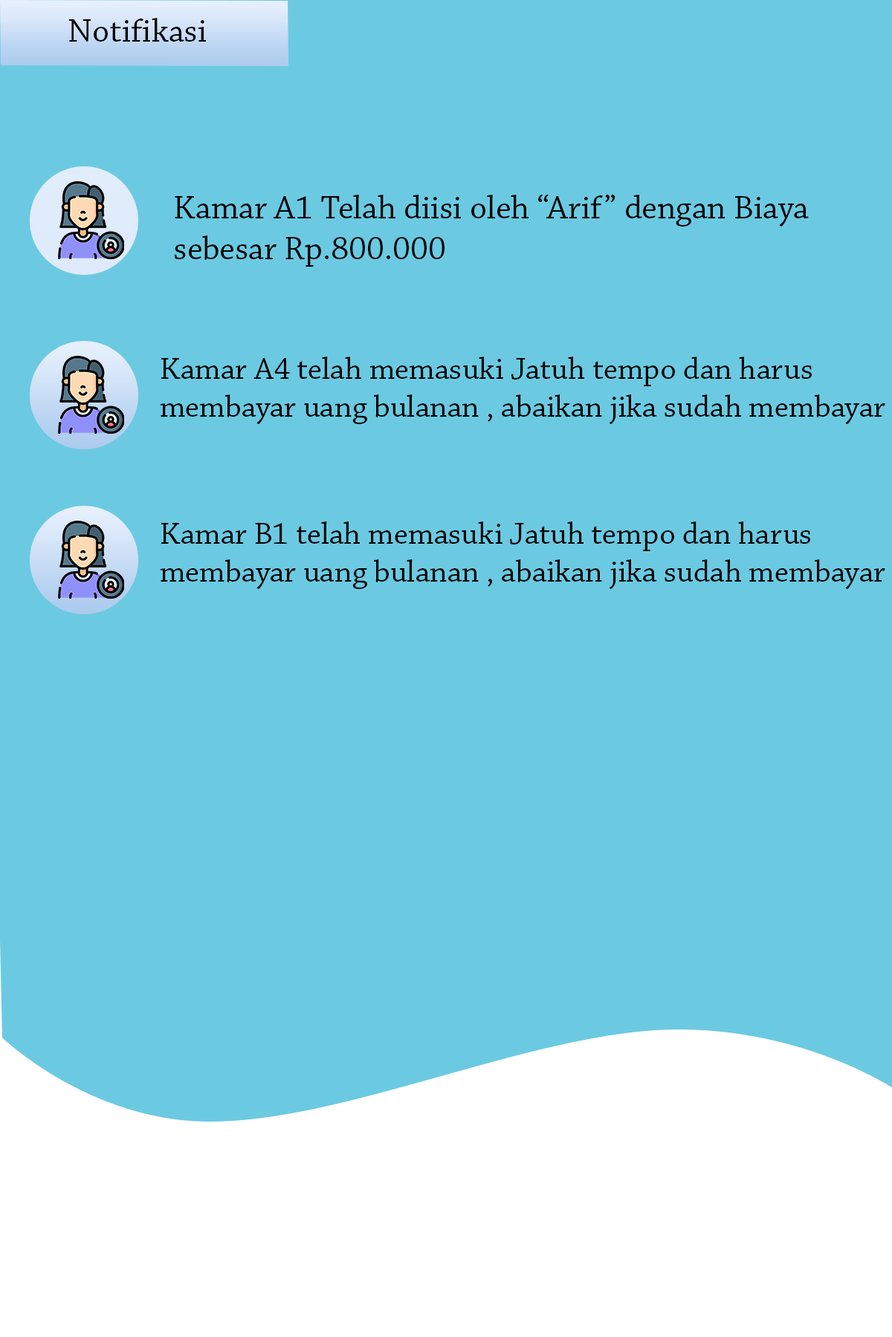
<style>
.page{position:relative;width:892px;height:1337px;background:#6bcae2}
.page>*{position:absolute;margin:0}
.t1{font:34.1px "ChaparralPro-Regular";color:#000101}
.t2{font:31.8px "ChaparralPro-Regular";color:#000101}
</style>
<div class="page">
<p class="t1" style="left:69px;top:18px;width:137px;height:24px">Notifikasi</p>
<p class="t1" style="left:174px;top:194px;width:634px;height:73px">Kamar A1 Telah diisi oleh “Arif” dengan Biaya sebesar Rp.800.000</p>
<p class="t2" style="left:160px;top:357px;width:725px;height:67px">Kamar A4 telah memasuki Jatuh tempo dan harus membayar uang bulanan , abaikan jika sudah membayar</p>
<p class="t2" style="left:160px;top:522px;width:725px;height:67px">Kamar B1 telah memasuki Jatuh tempo dan harus membayar uang bulanan , abaikan jika sudah membayar</p>
</div>
